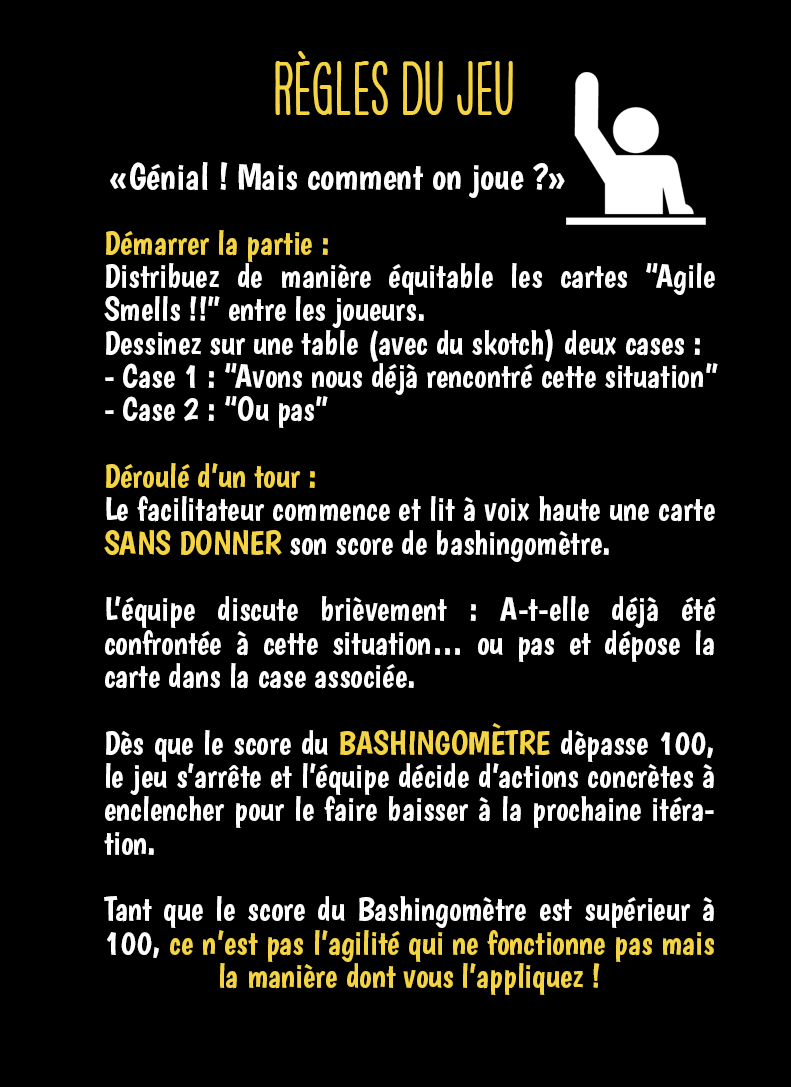
<style>
.page{position:relative;width:791px;height:1087px;background:#000000}
.page>*{position:absolute;margin:0}
.t1{font:66.7px "HAVEANICEDAYTallW04-Bold";color:#f4d443}
.t2{font:37.5px "Boogaloo-Regular";color:#ffffff}
.t3{font:33.3px/33.3px "Boogaloo-Regular";color:#ffffff}
.t4{font:33.3px/33.3px "Boogaloo-Regular";color:#f4d443}
</style>
<div class="page">
<p class="t1" style="left:275px;top:51px;width:238px;height:64px">RèGLES DU JEU</p>
<p class="t2" style="left:110px;top:162px;width:455px;height:36px">«Génial ! Mais comment on joue ?»</p>
<p class="t3" style="left:104px;top:230px;width:614px;height:765px;text-align:justify"><span class="t4">Démarrer la partie :<br></span>Distribuez de manière équitable les cartes “Agile Smells !!” entre les joueurs.<br>Dessinez sur une table (avec du skotch) deux cases :<br>- Case 1 : “Avons nous déjà rencontré cette situation”<br>- Case 2 : “Ou pas”<br><br><span class="t4">Déroulé d’un tour :<br></span>Le facilitateur commence et lit à voix haute une carte <span class="t4">SANS DONNER </span>son score de bashingomètre.<br><br>L’équipe discute brièvement : A-t-elle déjà été confrontée à cette situation… ou pas et dépose la carte dans la case associée.<br><br>Dès que le score du <span class="t4">BASHINGOMÈTRE </span>dèpasse 100, le jeu s’arrête et l’équipe décide d’actions concrètes à enclencher pour le faire baisser à la prochaine itération.<br><br>Tant que le score du Bashingomètre est supérieur à 100, <span class="t4">ce n’est pas l’agilité qui ne fonctionne pas mais la manière dont vous l’appliquez !</span></p>
</div>
